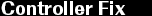
<style>
.page{position:relative;width:152px;height:16px;background:#000000}
.page>*{position:absolute;margin:0}
.t1{font:17.2px "FolkPro-Heavy";color:#ffffff}
</style>
<div class="page">
<p class="t1" style="left:1px;top:1px;width:125px;height:14px">Controller Fix</p>
</div>
